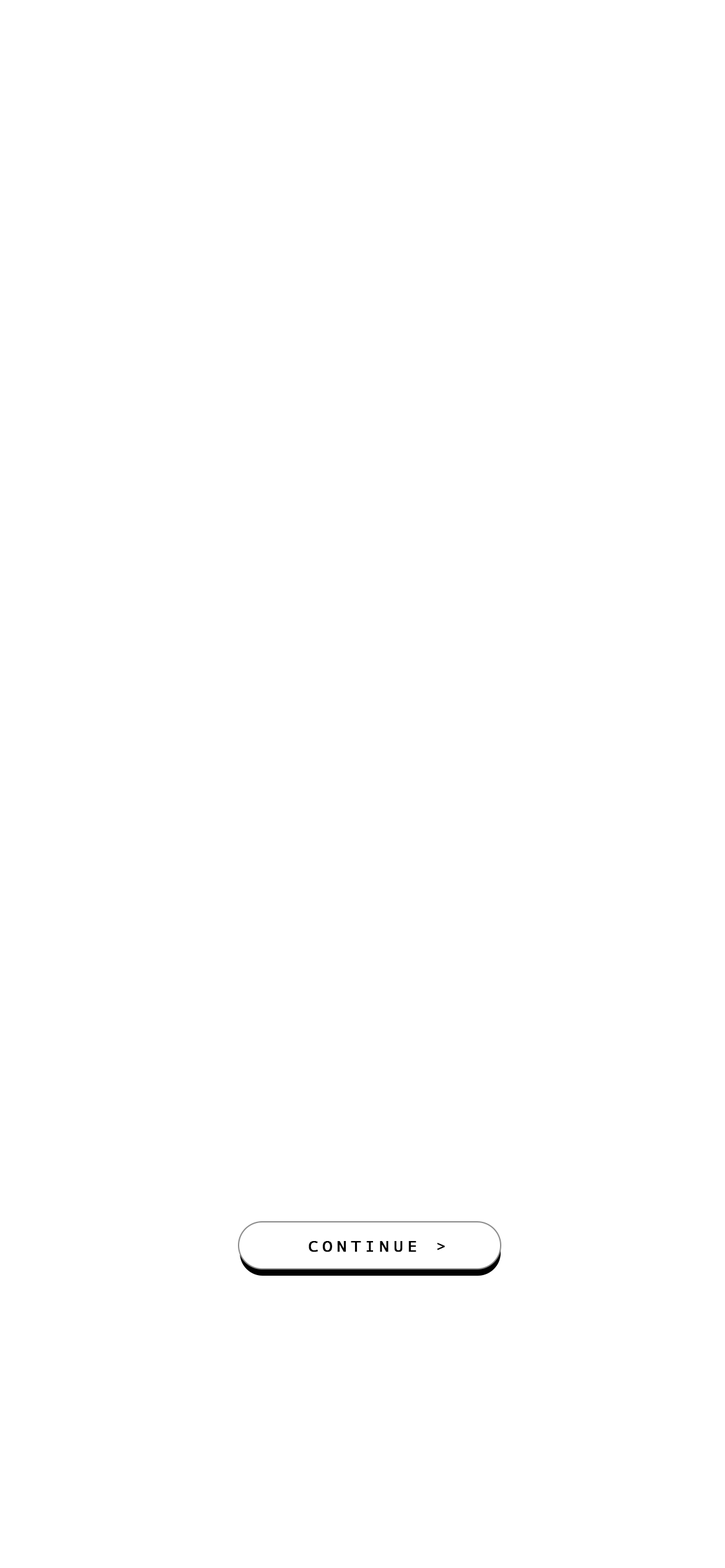
<style>
.page{position:relative;width:725px;height:1568px;background:#ffffff}
.page>*{position:absolute;margin:0}
.t1{font:14.9px "AndaleMono";letter-spacing:0.14em;color:#000000;font-weight:bold;scale:1.24 1}
</style>
<div class="page">
<p class="t1" style="left:308px;top:1241px;width:137px;height:11px">CONTINUE &gt;</p>
</div>
